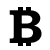
<style>
.page{position:relative;width:50px;height:50px;background:#ffffff}
.page>*{position:absolute;margin:0}
.t1{font:48px "BookmanOldStyle-Bold";letter-spacing:0.05em;color:#000000}
</style>
<div class="page">
<p class="t1" style="left:9px;top:10px;width:33px;height:33px">B</p>
</div>
